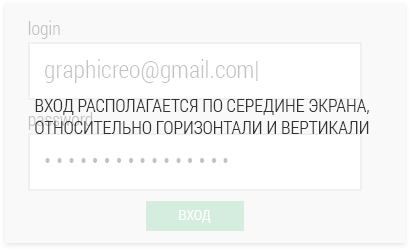
<style>
.page{position:relative;width:411px;height:251px;background:#f9f9f9}
.page>*{position:absolute;margin:0}
.t1{font:18px "RobotoCondensed-Light";color:#c2c2c2}
.t2{font:24px "RobotoCondensed-Light";color:#c2c2c2}
.t3{font:18px/22px "RobotoCondensed-Light";color:#333333;text-transform:uppercase}
.t4{font:24px "RobotoCondensed-Light";letter-spacing:0.2em;color:#c2c2c2}
.t5{font:18px "RobotoCondensed-Light";color:#ffffff}
</style>
<div class="page">
<p class="t1" style="left:28px;top:20px;width:32px;height:19px">login</p>
<p class="t2" style="left:45px;top:59px;width:213px;height:24px">graphicreo@gmail.com|</p>
<p class="t3" style="left:35px;top:99px;width:334px;height:35px;text-align:center">Вход располагается по середине экрана, относительно горизонтали и вертикали</p>
<p class="t4" style="left:45px;top:158px;width:183px;height:5px">••••••••••••••••</p>
<p class="t5" style="left:179px;top:210px;width:32px;height:13px">вход</p>
<p class="t5" style="left:179px;top:210px;width:32px;height:13px">вход</p>
</div>
